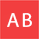
<style>
.page{position:relative;width:39px;height:39px;background:#f23e3f}
.page>*{position:absolute;margin:0}
.t1{font:20.8px "MyriadPro-Regular";letter-spacing:0.1em;color:#ffffff}
</style>
<div class="page">
<p class="t1" style="left:7px;top:13px;width:25px;height:14px">AB</p>
</div>
